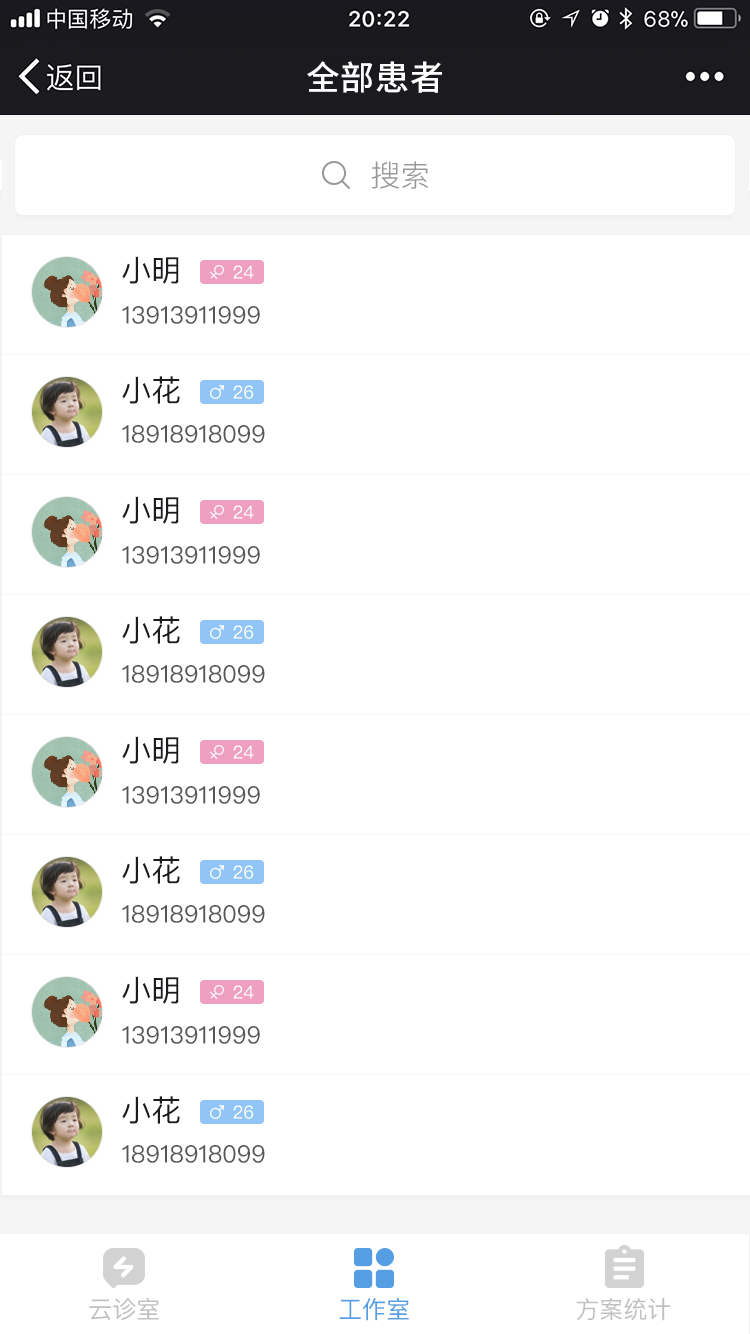
<style>
.page{position:relative;width:750px;height:1334px;background:#ffffff}
.page>*{position:absolute;margin:0}
.t1{font:34px "SourceHanSansCN-Medium";letter-spacing:0.02em;color:#ffffff}
.t2{font:30px "PingFangSC-Light";color:#979797}
.t3{font:30px "PingFangSC-Regular";color:#1b1b1f}
.t4{font:18px "PingFangSC-Regular";color:#ffffff}
.t5{font:24px "PingFangSC-Regular";color:#555555}
.t6{font:24px "PingFangSC-Regular";color:#c0c0c0}
.t7{font:24px "PingFangSC-Regular";color:#569ee3}
</style>
<div class="page">
<p class="t1" style="left:307px;top:61px;width:135px;height:32px">全部患者</p>
<p class="t2" style="left:371px;top:161px;width:57px;height:28px">搜索</p>
<p class="t3" style="left:122px;top:256px;width:57px;height:28px">小明</p>
<p class="t4" style="left:233px;top:265px;width:21px;height:14px">24</p>
<p class="t5" style="left:122px;top:306px;width:138px;height:18px">13913911999</p>
<p class="t3" style="left:122px;top:376px;width:58px;height:28px">小花</p>
<p class="t4" style="left:233px;top:385px;width:21px;height:14px">26</p>
<p class="t5" style="left:122px;top:425px;width:143px;height:18px">18918918099</p>
<p class="t3" style="left:122px;top:496px;width:57px;height:28px">小明</p>
<p class="t4" style="left:233px;top:505px;width:21px;height:14px">24</p>
<p class="t5" style="left:122px;top:546px;width:138px;height:18px">13913911999</p>
<p class="t3" style="left:122px;top:616px;width:58px;height:28px">小花</p>
<p class="t4" style="left:233px;top:625px;width:21px;height:14px">26</p>
<p class="t5" style="left:122px;top:665px;width:143px;height:18px">18918918099</p>
<p class="t3" style="left:122px;top:736px;width:57px;height:28px">小明</p>
<p class="t4" style="left:233px;top:745px;width:21px;height:14px">24</p>
<p class="t5" style="left:122px;top:786px;width:138px;height:18px">13913911999</p>
<p class="t3" style="left:122px;top:856px;width:58px;height:28px">小花</p>
<p class="t4" style="left:233px;top:865px;width:21px;height:14px">26</p>
<p class="t5" style="left:122px;top:905px;width:143px;height:18px">18918918099</p>
<p class="t3" style="left:122px;top:976px;width:57px;height:28px">小明</p>
<p class="t4" style="left:233px;top:985px;width:21px;height:14px">24</p>
<p class="t5" style="left:122px;top:1026px;width:138px;height:18px">13913911999</p>
<p class="t3" style="left:122px;top:1096px;width:58px;height:28px">小花</p>
<p class="t4" style="left:233px;top:1105px;width:21px;height:14px">26</p>
<p class="t5" style="left:122px;top:1145px;width:143px;height:18px">18918918099</p>
<p class="t6" style="left:89px;top:1298px;width:70px;height:23px">云诊室</p>
<p class="t7" style="left:339px;top:1298px;width:70px;height:23px">工作室</p>
<p class="t6" style="left:576px;top:1298px;width:95px;height:23px">方案统计</p>
</div>
